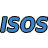
<style>
.page{position:relative;width:48px;height:48px;background:#ffffff}
.page>*{position:absolute;margin:0}
.t1{font:20px "DejaVuSansCondensed-BoldOblique";color:#3d85c6}
</style>
<div class="page">
<p class="t1" style="left:0px;top:16px;width:48px;height:17px">ISOS</p>
</div>
